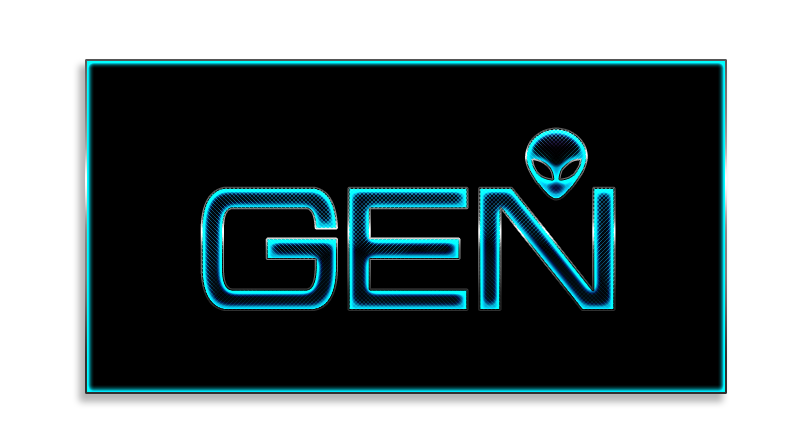
<style>
.page{position:relative;width:812px;height:446px;background:#000000}
.page>*{position:absolute;margin:0}
.t1{font:72.8px "Alienator";font-weight:bold}
.t2{font:166.6px "Probert-Bold";font-weight:bold}
</style>
<div class="page">
<p class="t1" style="left:526px;top:128px;width:61px;height:72px">b</p>
<p class="t2" style="left:201px;top:187px;width:414px;height:123px">GEN</p>
</div>
